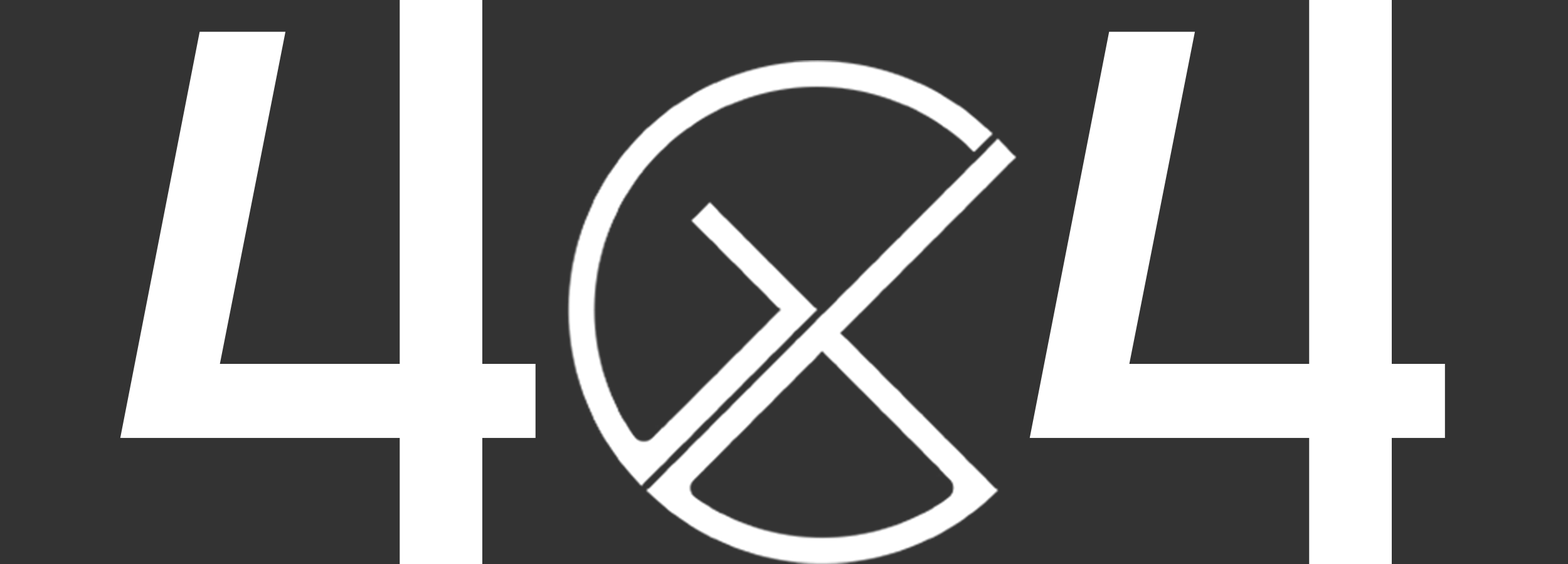
<style>
.page{position:relative;width:1568px;height:564px;background:#333333}
.page>*{position:absolute;margin:0}
.t1{font:812.9px "CascadiaCode-Regular";color:#ffffff}
</style>
<div class="page">
<p class="t1" style="left:120px;top:0px;width:416px;height:564px">4</p>
<p class="t1" style="left:1029px;top:0px;width:416px;height:564px">4</p>
</div>
